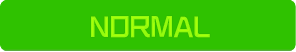
<style>
.page{position:relative;width:296px;height:52px;background:#2fc200}
.page>*{position:absolute;margin:0}
.t1{font:24px "KafuTechnoStd-HV";color:#a7ff08;scale:0.92 1}
</style>
<div class="page">
<p class="t1" style="left:91px;top:16px;width:119px;height:22px">NORMAL</p>
</div>
